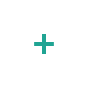
<style>
.page{position:relative;width:90px;height:90px;background:#ffffff}
.page>*{position:absolute;margin:0}
.t1{font:30px "Verdana-Bold";letter-spacing:-0.15em;color:#20a493}
</style>
<div class="page">
<p class="t1" style="left:34px;top:34px;width:20px;height:20px">+</p>
</div>
